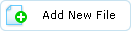
<style>
.page{position:relative;width:131px;height:31px;background:#ffffff}
.page>*{position:absolute;margin:0}
.t1{font:11px "Verdana";letter-spacing:0.01em;color:#000000}
</style>
<div class="page">
<p class="t1" style="left:43px;top:10px;width:72px;height:9px">Add New File</p>
</div>
